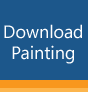
<style>
.page{position:relative;width:88px;height:92px;background:#1c578b}
.page>*{position:absolute;margin:0}
.t1{font:18px "SegoeUI";color:#ffffff}
</style>
<div class="page">
<p class="t1" style="left:4px;top:24px;width:78px;height:40px;text-align:center">Download<br>Painting</p>
</div>
